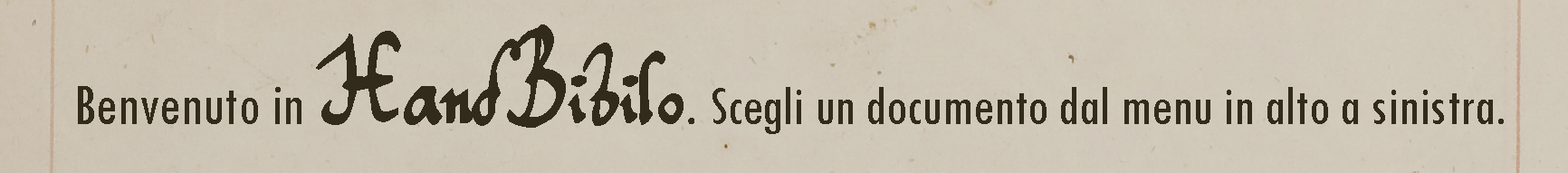
<style>
.page{position:relative;width:1568px;height:173px}
.page>*{position:absolute;margin:0}
.t1{font:56.6px "TwCenMT-Condensed";color:#322b1c}
.t2{font:60.4px "TwCenMT-Condensed";color:#322b1c}
.t3{font:181.1px "TomsHandwriting";color:#322b1c}
.t4{font:67.9px "TwCenMT-Condensed";color:#322b1c}
</style>
<div class="page">
<p class="t1" style="left:78px;top:24px;width:1426px;height:110px"><span class="t2">Benvenuto in </span><span class="t3">HandBibilo</span><span class="t4">. </span>Scegli un documento dal menu in alto a sinistra.</p>
</div>
